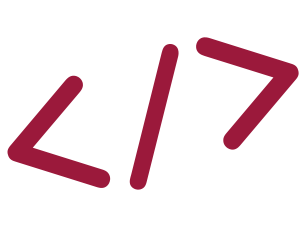
<style>
.page{position:relative;width:300px;height:230px;background:#ffffff}
.page>*{position:absolute;margin:0}
.t1{font:169.1px "OCRAStd";letter-spacing:-0.1em;color:#9b193b}
</style>
<div class="page">
<p class="t1" style="left:7px;top:37px;width:292px;height:153px;rotate:-16deg">&lt;/&gt;</p>
</div>
